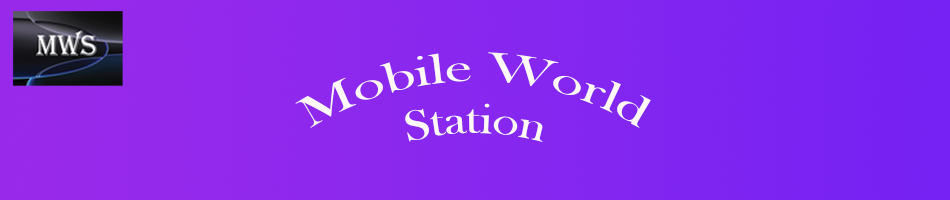
<style>
.page{position:relative;width:950px;height:200px}
.page>*{position:absolute;margin:0}
.t1{font:43.3px "BaskOldFace";letter-spacing:0.005em;color:#fff6f6}
</style>
<div class="page">
<p class="t1" style="left:295px;top:52px;width:356px;height:90px;text-align:center">Mobile World <br>Station</p>
</div>
